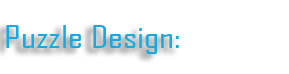
<style>
.page{position:relative;width:289px;height:74px;background:#ffffff}
.page>*{position:absolute;margin:0}
.t1{font:30.5px "AgencyFB-Reg";color:#1ca8dd;scale:1.3 1}
</style>
<div class="page">
<p class="t1" style="left:6px;top:25px;width:173px;height:29px">Puzzle Design:</p>
</div>
